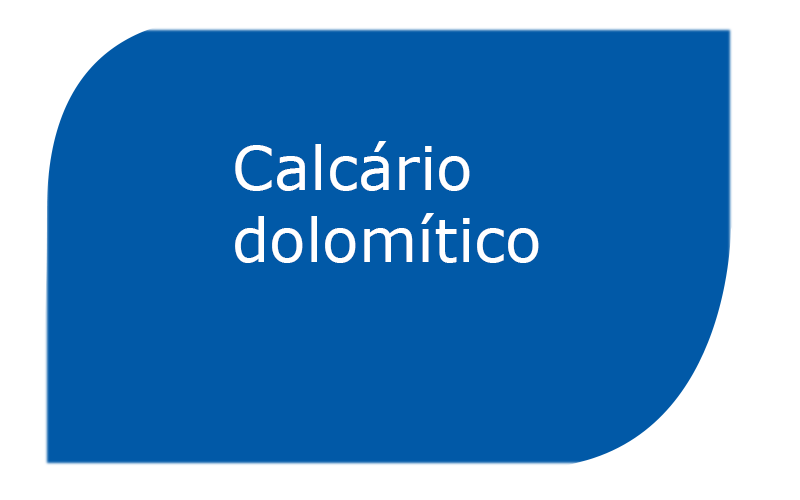
<style>
.page{position:relative;width:800px;height:500px;background:#0159a7}
.page>*{position:absolute;margin:0}
.t1{font:60px "MSReferenceSansSerif";color:#ffffff}
</style>
<div class="page">
<p class="t1" style="left:235px;top:141px;width:304px;height:122px">Calcário dolomítico</p>
</div>
